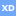
<style>
.page{position:relative;width:16px;height:16px;background:#6fa6f7}
.page>*{position:absolute;margin:0}
.t1{font:8.3px "Verdana-Bold";color:#ffffff}
</style>
<div class="page">
<p class="t1" style="left:1px;top:4px;width:14px;height:8px">XD</p>
</div>
